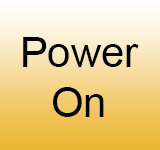
<style>
.page{position:relative;width:160px;height:150px}
.page>*{position:absolute;margin:0}
.t1{font:41.7px "ArialMT";color:#010101}
</style>
<div class="page">
<p class="t1" style="left:23px;top:37px;width:116px;height:80px;text-align:center">Power<br>On</p>
</div>
